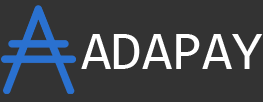
<style>
.page{position:relative;width:263px;height:102px;background:#333333}
.page>*{position:absolute;margin:0}
.t1{font:55px "Consolas";color:#ffffff}
</style>
<div class="page">
<p class="t1" style="left:81px;top:34px;width:182px;height:35px">ADAPAY</p>
</div>
